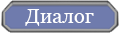
<style>
.page{position:relative;width:120px;height:33px;background:#6f7bad}
.page>*{position:absolute;margin:0}
.t1{font:20px "Georgia";color:#ffffff}
</style>
<div class="page">
<p class="t1" style="left:25px;top:9px;width:69px;height:17px">Диалог</p>
</div>
